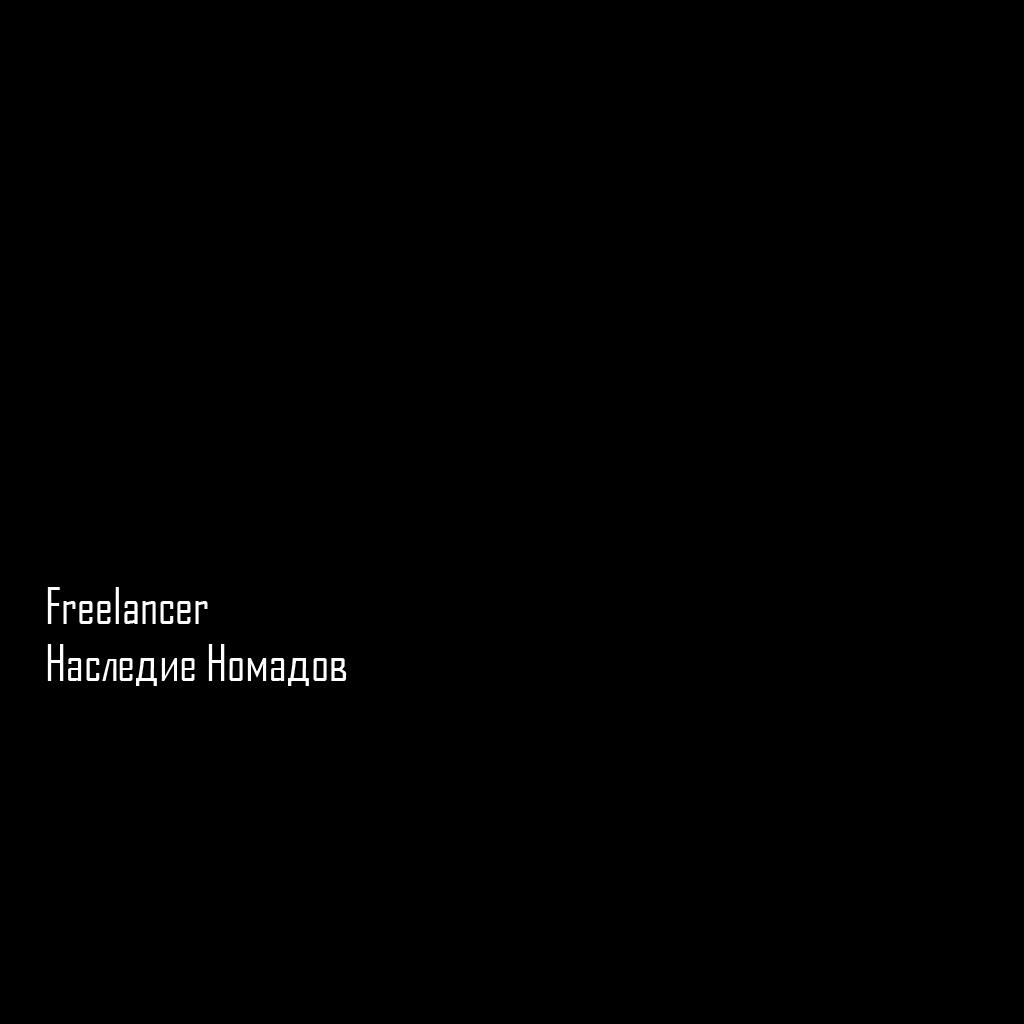
<style>
.page{position:relative;width:1024px;height:1024px;background:#000000}
.page>*{position:absolute;margin:0}
.t1{font:48px "AgencyFBCyrillic";color:#ffffff}
</style>
<div class="page">
<p class="t1" style="left:47px;top:587px;width:300px;height:99px">Freelancer<br>Наследие Номадов</p>
</div>
